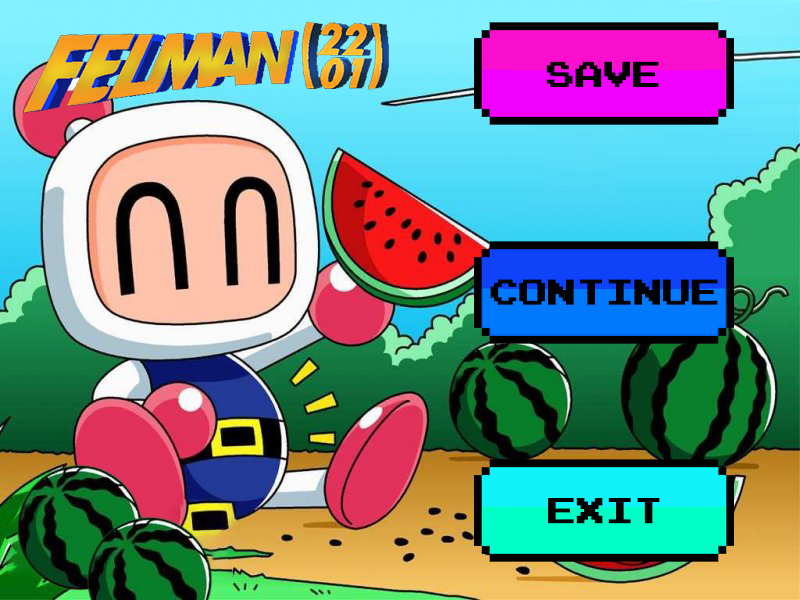
<style>
.page{position:relative;width:800px;height:600px}
.page>*{position:absolute;margin:0}
.t1{font:29px "ArcadeNormal";letter-spacing:-0.03em;color:#000000;font-weight:bold}
.t2{font:29px "ArcadeNormal";letter-spacing:-0.03em;color:#010101;font-weight:bold}
</style>
<div class="page">
<p class="t1" style="left:546px;top:61px;width:113px;height:26px">SAVE</p>
<p class="t2" style="left:490px;top:279px;width:228px;height:26px">CONTINUE</p>
<p class="t1" style="left:548px;top:498px;width:112px;height:26px">EXIT</p>
</div>
